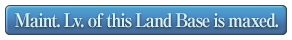
<style>
.page{position:relative;width:292px;height:40px;background:#ffffff}
.page>*{position:absolute;margin:0}
.t1{font:19px "RyuminPro-ExBold";letter-spacing:-0.08em;color:#d1f3fb;scale:0.9 1}
</style>
<div class="page">
<p class="t1" style="left:15px;top:13px;width:263px;height:15px">Maint. Lv. of this Land Base is maxed.</p>
</div>
